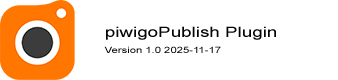
<style>
.page{position:relative;width:338px;height:80px;background:#ffffff}
.page>*{position:absolute;margin:0}
.t1{font:14.1px "ArialMT";color:#050505;scale:1.33 1}
.t2{font:8.5px "ArialMT";color:#050505;scale:1.33 1}
</style>
<div class="page">
<p class="t1" style="left:106px;top:26px;width:170px;height:14px">piwigoPublish Plugin</p>
<p class="t2" style="left:104px;top:46px;width:117px;height:7px">Version 1.0 2025-11-17</p>
</div>
